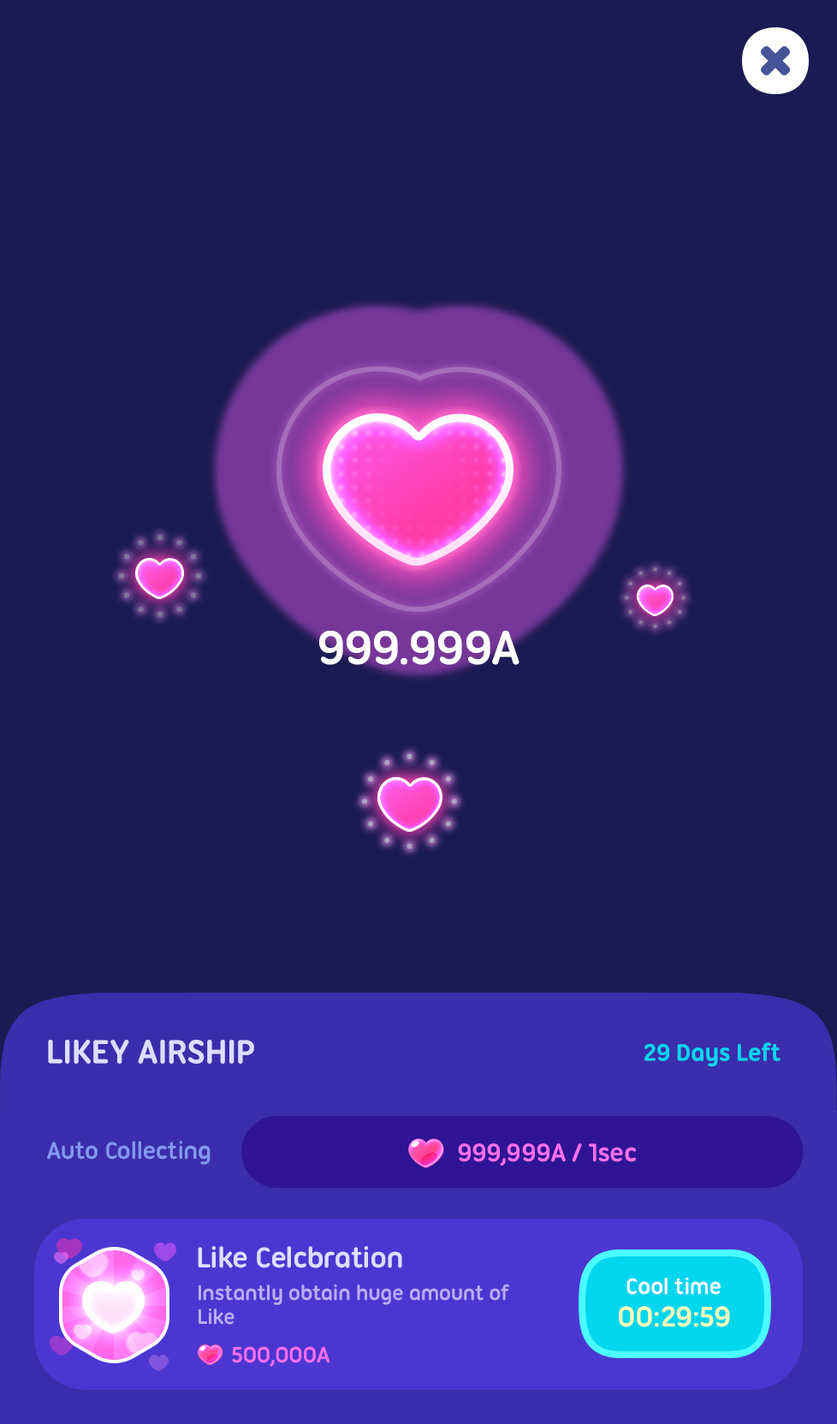
<style>
.page{position:relative;width:837px;height:1424px;background:#1b1b53}
.page>*{position:absolute;margin:0}
.t1{font:51.4px "UbuntuTitling-Bold";letter-spacing:-0.025em;color:#ffffff}
.t2{font:36px "UbuntuTitling-Bold";letter-spacing:-0.025em;color:#ddddff;text-transform:uppercase}
.t3{font:25.7px "UbuntuTitling-Bold";letter-spacing:-0.025em;color:#03d6ef}
.t4{font:25.7px "UbuntuTitling-Bold";letter-spacing:-0.025em;color:#8497f2}
.t5{font:27.4px "UbuntuTitling-Bold";letter-spacing:-0.025em;color:#ff6fec}
.t6{font:30.8px "UbuntuTitling-Bold";letter-spacing:-0.025em;color:#ddddff}
.t7{font:24px "UbuntuTitling-Bold";letter-spacing:-0.025em;color:#ffffff}
.t8{font:22.3px/24px "UbuntuTitling-Bold";letter-spacing:-0.025em;color:#bbabf4}
.t9{font:30.8px "UbuntuTitling-Bold";letter-spacing:-0.025em;color:#fefbb7}
.t10{font:24px "UbuntuTitling-Bold";letter-spacing:-0.025em;color:#ff6fec}
</style>
<div class="page">
<p class="t1" style="left:319px;top:631px;width:201px;height:34px">999.999A</p>
<p class="t2" style="left:48px;top:1040px;width:206px;height:24px">Likey Airship</p>
<p class="t3" style="left:645px;top:1043px;width:136px;height:24px">29 Days Left</p>
<p class="t4" style="left:47px;top:1141px;width:164px;height:24px">Auto Collecting</p>
<p class="t5" style="left:458px;top:1144px;width:178px;height:22px">999,999A / 1sec</p>
<p class="t6" style="left:198px;top:1246px;width:204px;height:23px">Like Celcbration</p>
<p class="t7" style="left:627px;top:1277px;width:94px;height:18px">Cool time</p>
<p class="t8" style="left:199px;top:1284px;width:310px;height:41px">Instantly obtain huge amount of <br>Like</p>
<p class="t9" style="left:619px;top:1306px;width:111px;height:22px">00:29:59</p>
<p class="t10" style="left:232px;top:1346px;width:98px;height:21px">500,000A</p>
</div>
